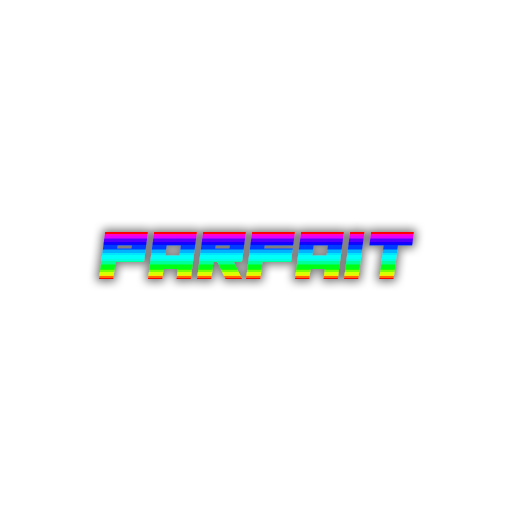
<style>
.page{position:relative;width:512px;height:512px;background:#ffffff}
.page>*{position:absolute;margin:0}
.t1{font:68.3px "NauSea";letter-spacing:0.04em;scale:1.06 1}
</style>
<div class="page">
<p class="t1" style="left:99px;top:232px;width:315px;height:47px">Parfait</p>
</div>
